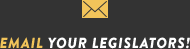
<style>
.page{position:relative;width:190px;height:49px;background:#333333}
.page>*{position:absolute;margin:0}
.t1{font:14.6px "BrandonGrotesque-BlackItalic";letter-spacing:0.055em;color:#ffffff}
.t2{font:14.6px "BrandonGrotesque-BlackItalic";letter-spacing:0.055em;color:#f2c45a}
</style>
<div class="page">
<p class="t1" style="left:0px;top:37px;width:190px;height:12px"><span class="t2">EMAIL </span>YOUR LEGISLATORS!</p>
</div>
